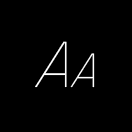
<style>
.page{position:relative;width:132px;height:132px;background:#000000}
.page>*{position:absolute;margin:0}
.t1{font:64.5px "DolceVitaLight";color:#ffffff}
.t2{font:47.8px "DolceVitaLight";color:#ffffff}
</style>
<div class="page">
<p class="t1" style="left:35px;top:41px;width:60px;height:47px">A<span class="t2">a</span></p>
</div>
